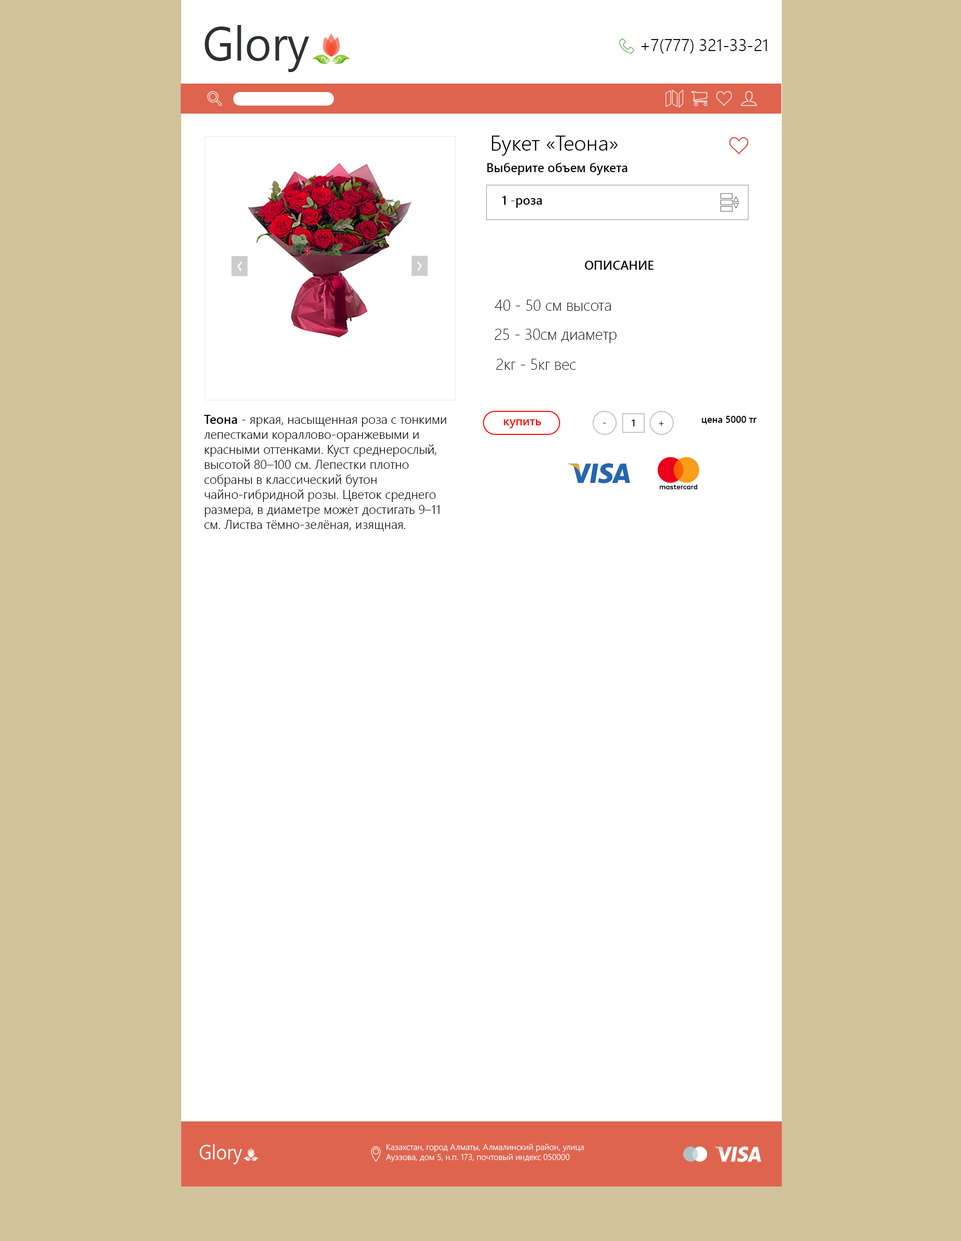
<style>
.page{position:relative;width:961px;height:1241px;background:#ffffff}
.page>*{position:absolute;margin:0}
.t1{font:16.7px "SegoeUI-Semilight";color:#000000}
.t2{font:20.9px "SegoeUI-Semilight";color:#000000}
.t3{font:12.5px "SegoeUI-Semibold";color:#000000}
.t4{font:15.4px "SegoeUI-Light";color:#000000}
.t5{font:12.5px "SegoeUI-Semilight";color:#000000}
.t6{font:12px "SegoeUI-Semibold";color:#ff0000}
.t7{font:10px "SegoeUI-Semilight";color:#000000}
.t8{font:10px "SegoeUI-Semibold";color:#000000}
.t9{font:10px "SegoeUI-Semibold";color:#000000;scale:0.95 1}
.t10{font:8.4px "SegoeUI-Semilight";color:#ffffff}
</style>
<div class="page">
<p class="t1" style="left:641px;top:39px;width:126px;height:15px">+7(777) 321-33-21</p>
<p class="t2" style="left:491px;top:136px;width:127px;height:20px">Букет «Теона»</p>
<p class="t3" style="left:487px;top:163px;width:140px;height:12px">Выберите объем букета</p>
<p class="t3" style="left:502px;top:196px;width:40px;height:12px">1 -роза</p>
<p class="t3" style="left:584px;top:261px;width:70px;height:9px">ОПИСАНИЕ</p>
<p class="t4" style="left:494px;top:300px;width:117px;height:11px">40 - 50 см высота</p>
<p class="t4" style="left:494px;top:329px;width:123px;height:14px">25 - 30см диаметр</p>
<p class="t4" style="left:496px;top:359px;width:80px;height:11px">2кг - 5кг вес</p>
<p class="t5" style="left:204px;top:415px;width:242px;height:116px"><span class="t3">Теона</span> - яркая, насыщенная роза с тонкими лепестками кораллово-оранжевыми и красными оттенками. Куст среднерослый, высотой 80–100 см. Лепестки плотно собраны в классический бутон чайно-гибридной розы. Цветок среднего размера, в диаметре может достигать 9–11 см. Листва тёмно-зелёная, изящная.</p>
<p class="t6" style="left:503px;top:419px;width:38px;height:9px">купить</p>
<p class="t7" style="left:603px;top:423px;width:3px;height:0px">-</p>
<p class="t8" style="left:632px;top:419px;width:3px;height:7px">1</p>
<p class="t7" style="left:659px;top:421px;width:5px;height:5px">+</p>
<p class="t9" style="left:702px;top:416px;width:55px;height:8px">цена 5000 тг</p>
<p class="t10" style="left:386px;top:1143px;width:198px;height:19px">Казахстан, город Алматы, Алмалинский район, улица Ауэзова, дом 5, н.п. 173, почтовый индекс 050000</p>
</div>
